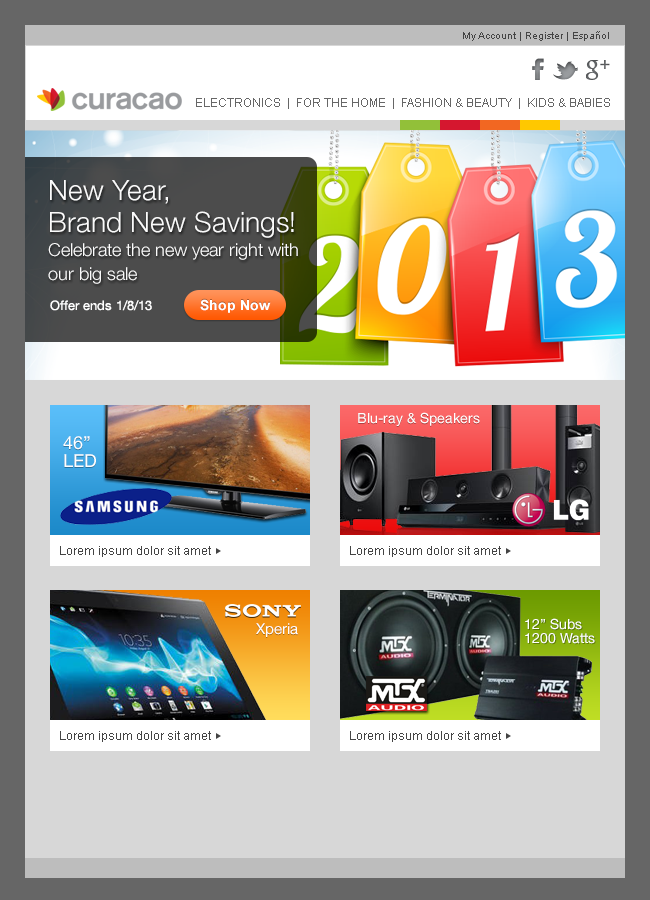
<style>
.page{position:relative;width:650px;height:900px;background:#d7d7d7}
.page>*{position:absolute;margin:0}
.t1{font:10px "ArialMT";color:#444444}
.t2{font:12px "ArialMT";color:#666666}
.t3{font:18px/24px "HelveticaNeue-Light";color:#ffffff}
.t4{font:28px/32px "HelveticaNeue-Light";color:#ffffff}
.t5{font:13px "HelveticaNeue-Roman";color:#ffffff}
.t6{font:14px "HelveticaNeue-Roman";color:#ffffff}
.t7{font:18px/18px "HelveticaNeue-Roman";color:#ffffff}
.t8{font:12px "ArialMT";color:#444444}
.t9{font:15px "HelveticaNeue-Roman";color:#ffffff}
.t10{font:14px/14px "HelveticaNeue-Roman";color:#ffffff}
</style>
<div class="page">
<p class="t1" style="left:463px;top:31px;width:146px;height:10px">My Account | Register | Español</p>
<p class="t2" style="left:196px;top:98px;width:414px;height:11px">ELECTRONICS  |  FOR THE HOME  |  FASHION &amp; BEAUTY  |  KIDS &amp; BABIES</p>
<p class="t3" style="left:48px;top:180px;width:250px;height:104px;opacity:0.97"><span class="t4">New Year,<br>Brand New Savings!<br></span>Celebrate the new year right with our big sale</p>
<p class="t5" style="left:50px;top:300px;width:102px;height:11px">Offer ends 1/8/13</p>
<p class="t6" style="left:358px;top:412px;width:122px;height:14px">Blu-ray &amp; Speakers</p>
<p class="t7" style="left:63px;top:436px;width:33px;height:31px">46”<br>LED</p>
<p class="t8" style="left:60px;top:546px;width:151px;height:11px">Lorem ipsum dolor sit amet</p>
<p class="t8" style="left:350px;top:546px;width:151px;height:11px">Lorem ipsum dolor sit amet</p>
<p class="t9" style="left:256px;top:623px;width:42px;height:14px">Xperia</p>
<p class="t10" style="left:525px;top:618px;width:70px;height:26px">12” Subs<br>1200 Watts</p>
<p class="t8" style="left:60px;top:731px;width:151px;height:11px">Lorem ipsum dolor sit amet</p>
<p class="t8" style="left:350px;top:731px;width:151px;height:11px">Lorem ipsum dolor sit amet</p>
</div>
